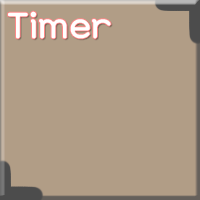
<style>
.page{position:relative;width:200px;height:200px;background:#b19d86}
.page>*{position:absolute;margin:0}
.t1{font:45px "YanoljaYacheR";color:#ffffff}
</style>
<div class="page">
<p class="t1" style="left:8px;top:11px;width:103px;height:28px">Timer</p>
</div>
